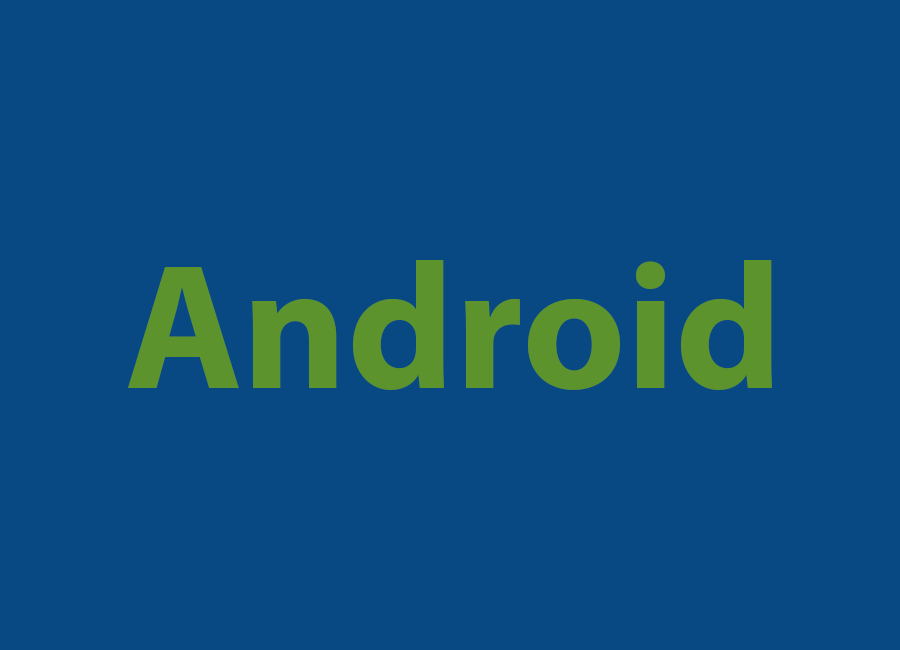
<style>
.page{position:relative;width:900px;height:650px;background:#094983}
.page>*{position:absolute;margin:0}
.t1{font:180px "MyriadPro-Bold";color:#5c932d}
</style>
<div class="page">
<p class="t1" style="left:128px;top:260px;width:644px;height:130px">Android</p>
</div>
